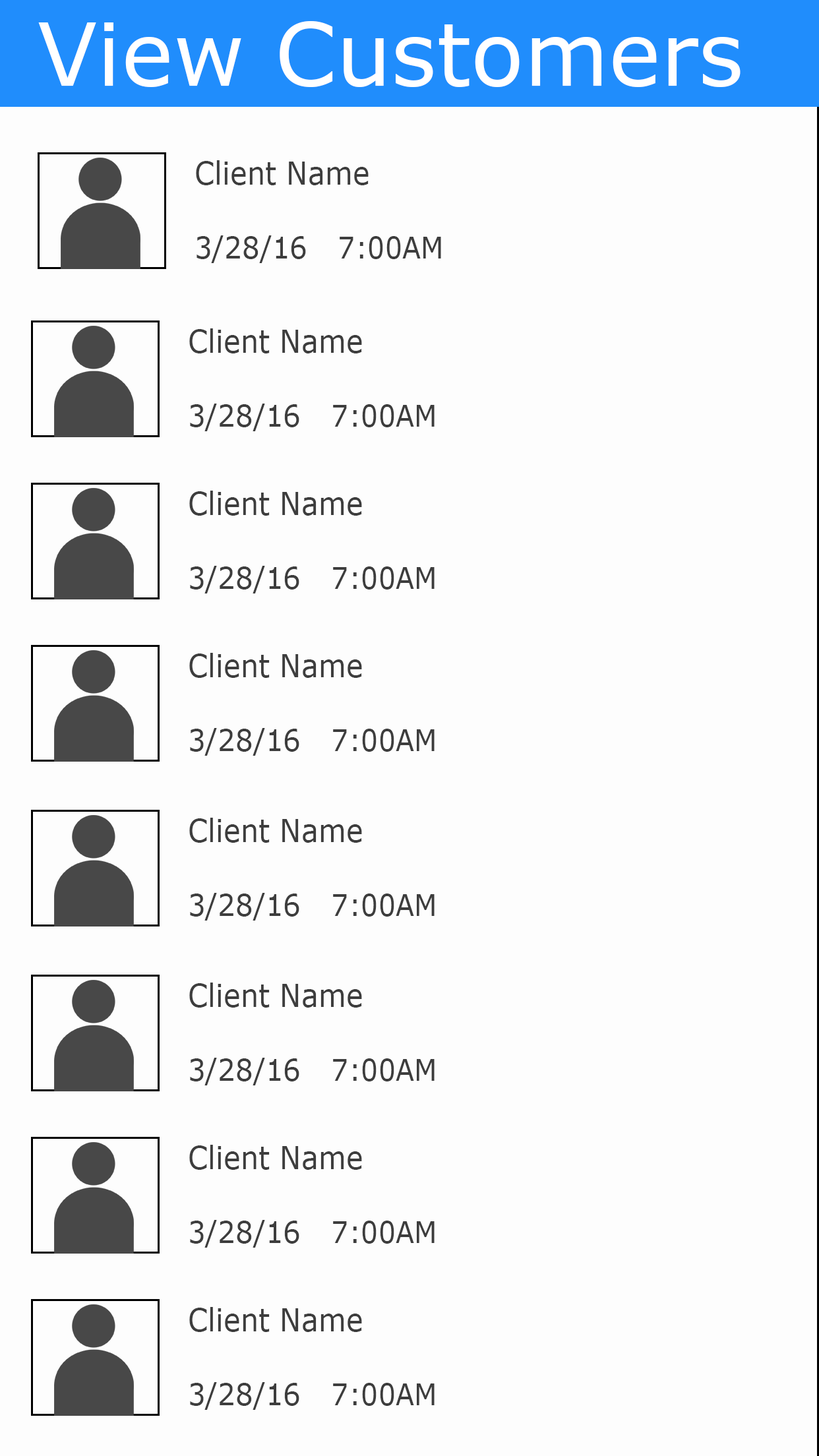
<style>
.page{position:relative;width:819px;height:1456px;background:#fdfdfd}
.page>*{position:absolute;margin:0}
.t1{font:87.2px "MSReferenceSansSerif";color:#ffffff}
.t2{font:31.4px "MSReferenceSansSerif";color:#3d3d3d;scale:0.91 1}
.t3{font:30.4px "MSReferenceSansSerif";color:#3d3d3d;scale:0.91 1}
.t4{font:29.9px "MSReferenceSansSerif";color:#3d3d3d;scale:0.91 1}
</style>
<div class="page">
<p class="t1" style="left:38px;top:21px;width:703px;height:66px">View Customers</p>
<p class="t2" style="left:196px;top:160px;width:173px;height:25px">Client Name</p>
<p class="t3" style="left:197px;top:235px;width:109px;height:28px">3/28/16</p>
<p class="t4" style="left:340px;top:236px;width:101px;height:23px">7:00AM</p>
<p class="t2" style="left:189px;top:328px;width:173px;height:25px">Client Name</p>
<p class="t3" style="left:190px;top:404px;width:109px;height:27px">3/28/16</p>
<p class="t4" style="left:333px;top:404px;width:102px;height:23px">7:00AM</p>
<p class="t2" style="left:189px;top:491px;width:173px;height:25px">Client Name</p>
<p class="t3" style="left:190px;top:566px;width:109px;height:27px">3/28/16</p>
<p class="t4" style="left:333px;top:566px;width:102px;height:24px">7:00AM</p>
<p class="t2" style="left:189px;top:653px;width:173px;height:25px">Client Name</p>
<p class="t3" style="left:190px;top:728px;width:109px;height:28px">3/28/16</p>
<p class="t4" style="left:333px;top:729px;width:102px;height:23px">7:00AM</p>
<p class="t2" style="left:189px;top:818px;width:173px;height:25px">Client Name</p>
<p class="t3" style="left:190px;top:893px;width:109px;height:28px">3/28/16</p>
<p class="t4" style="left:333px;top:894px;width:102px;height:23px">7:00AM</p>
<p class="t2" style="left:189px;top:983px;width:173px;height:25px">Client Name</p>
<p class="t3" style="left:190px;top:1058px;width:109px;height:27px">3/28/16</p>
<p class="t4" style="left:333px;top:1058px;width:102px;height:23px">7:00AM</p>
<p class="t2" style="left:189px;top:1145px;width:173px;height:25px">Client Name</p>
<p class="t3" style="left:190px;top:1220px;width:109px;height:28px">3/28/16</p>
<p class="t4" style="left:333px;top:1221px;width:102px;height:23px">7:00AM</p>
<p class="t2" style="left:189px;top:1307px;width:173px;height:25px">Client Name</p>
<p class="t3" style="left:190px;top:1382px;width:109px;height:28px">3/28/16</p>
<p class="t4" style="left:333px;top:1383px;width:102px;height:23px">7:00AM</p>
</div>
